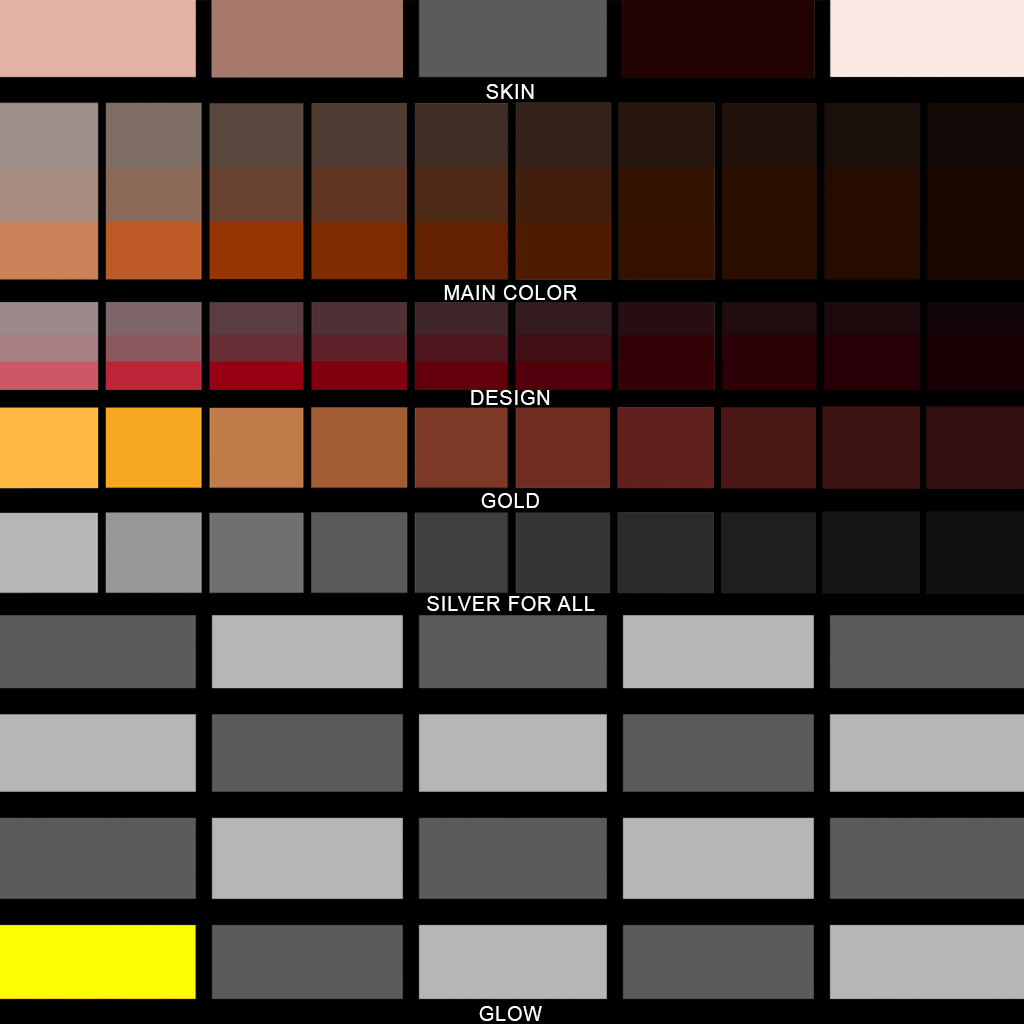
<style>
.page{position:relative;width:1024px;height:1024px;background:#000000}
.page>*{position:absolute;margin:0}
.t1{font:20px "ArialMT";letter-spacing:0.05em;color:#ffffff}
</style>
<div class="page">
<p class="t1" style="left:486px;top:84px;width:48px;height:15px">SKIN</p>
<p class="t1" style="left:444px;top:285px;width:133px;height:15px">MAIN COLOR</p>
<p class="t1" style="left:471px;top:390px;width:79px;height:15px">DESIGN</p>
<p class="t1" style="left:481px;top:493px;width:58px;height:15px">GOLD</p>
<p class="t1" style="left:427px;top:596px;width:168px;height:15px">SILVER FOR ALL</p>
<p class="t1" style="left:479px;top:1006px;width:63px;height:15px">GLOW</p>
</div>
